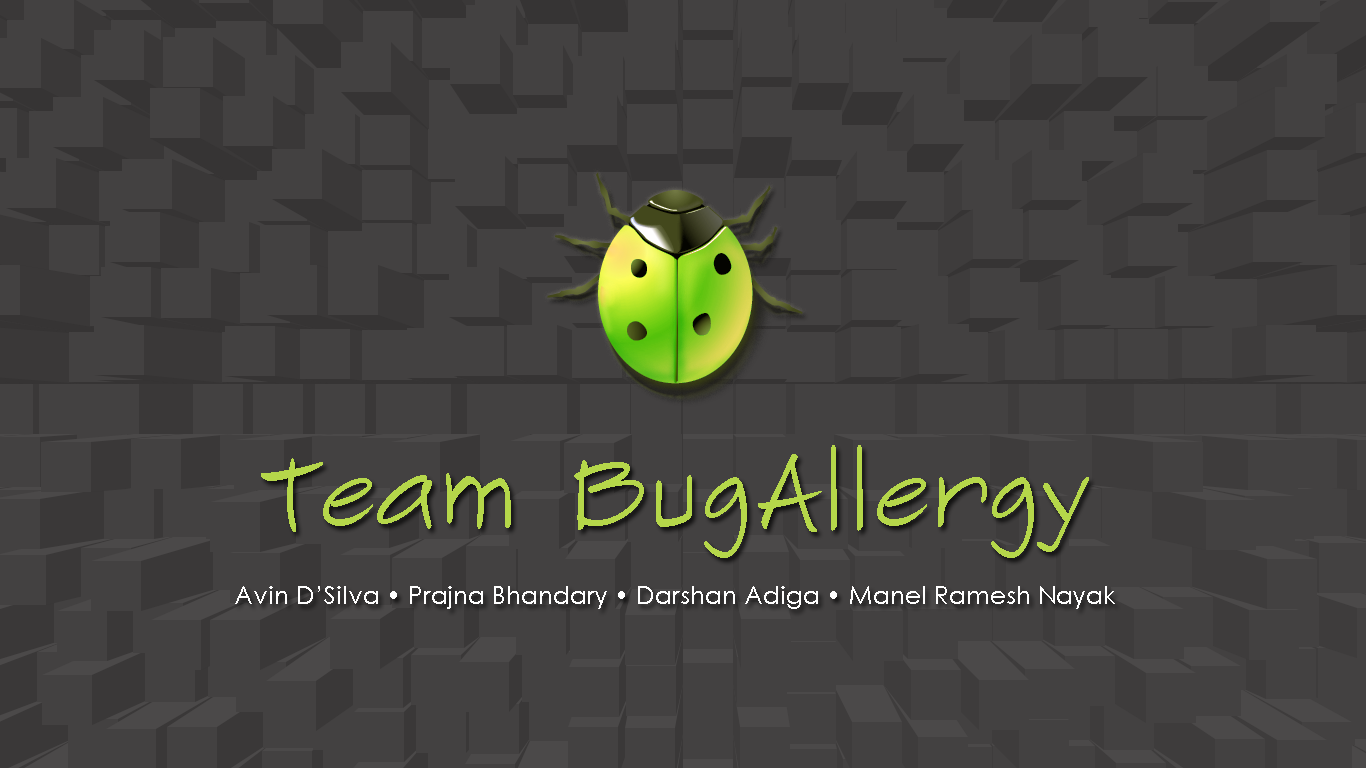
<style>
.page{position:relative;width:1366px;height:768px;background:#434141}
.page>*{position:absolute;margin:0}
.t1{font:100px "SketchFlowPrint";color:#b5d74a}
.t2{font:25px "CenturyGothic";color:#ffffff}
</style>
<div class="page">
<p class="t1" style="left:261px;top:445px;width:828px;height:113px">Team BugAllergy</p>
<p class="t2" style="left:235px;top:586px;width:880px;height:23px">Avin D’Silva • Prajna Bhandary • Darshan Adiga • Manel Ramesh Nayak</p>
</div>
